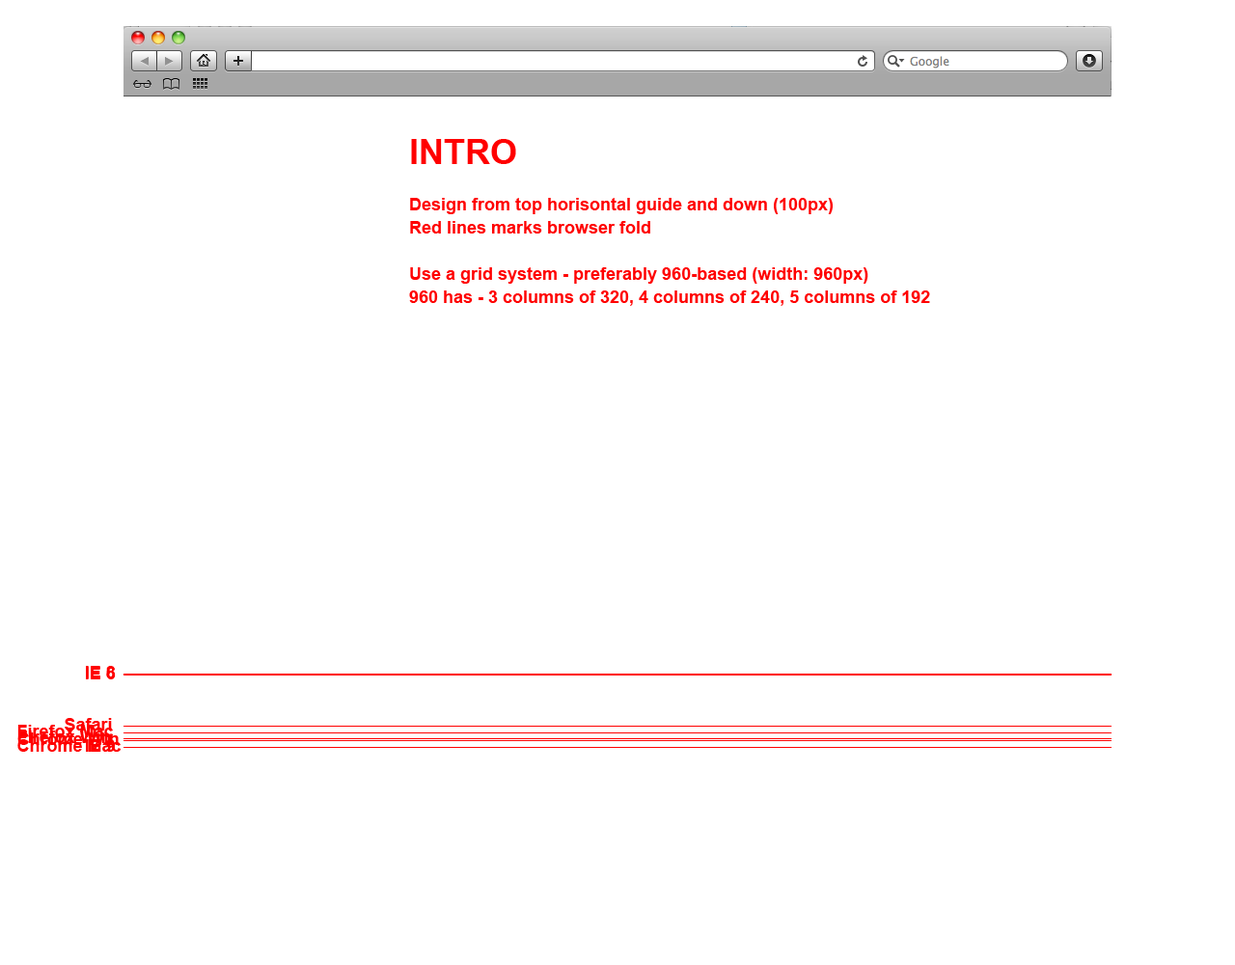
<style>
.page{position:relative;width:1235px;height:965px;background:#ffffff}
.page>*{position:absolute;margin:0}
.t1{font:17.4px/23.2px "Arial-BoldMT";color:#ff0000}
.t2{font:34.7px/23.2px "Arial-BoldMT";color:#ff0000}
</style>
<div class="page">
<p class="t1" style="left:409px;top:139px;width:521px;height:167px"><span class="t2">INTRO<br><br></span>Design from top horisontal guide and down (100px)<br>Red lines marks browser fold<br><br>Use a grid system - preferably 960-based (width: 960px)<br>960 has - 3 columns of 320, 4 columns of 240, 5 columns of 192</p>
</div>
